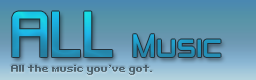
<style>
.page{position:relative;width:256px;height:80px}
.page>*{position:absolute;margin:0}
.t1{font:30px "ZeroThrees"}
.t2{font:60px "ZeroThrees"}
.t3{font:10px "Bit-Darling10-(sRB)";color:#51646f}
.t4{font:10px "Konami 10pt";color:#51646f}
</style>
<div class="page">
<p class="t1" style="left:12px;top:11px;width:209px;height:46px"><span class="t2">ALL </span>Music</p>
<p class="t3" style="left:11px;top:65px;width:141px;height:10px">All the music you<span class="t4">’</span>ve got.</p>
</div>
